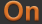
<style>
.page{position:relative;width:42px;height:24px;background:#333333}
.page>*{position:absolute;margin:0}
.t1{font:27px "Arial-BoldMT"}
</style>
<div class="page">
<p class="t1" style="left:4px;top:0px;width:35px;height:21px">On</p>
</div>
